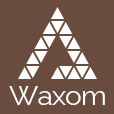
<style>
.page{position:relative;width:114px;height:114px;background:#694c3d}
.page>*{position:absolute;margin:0}
.t1{font:26px "Raleway-Regular";letter-spacing:-0.04em;color:#ffffff;scale:1.1 1}
</style>
<div class="page">
<p class="t1" style="left:9px;top:86px;width:96px;height:19px">Waxom</p>
</div>
